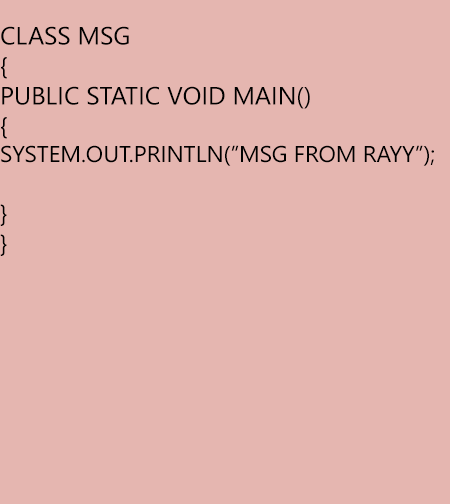
<style>
.page{position:relative;width:450px;height:504px;background:#e5b6b0}
.page>*{position:absolute;margin:0}
.t1{font:25px "NirmalaUI";color:#000000;text-transform:uppercase}
.t2{font:22.9px "NirmalaUI";color:#000000;text-transform:uppercase}
</style>
<div class="page">
<p class="t1" style="left:0px;top:26px;width:434px;height:230px">Class msg<br>{<br>public static void main()<br>{<br><span class="t2">System.out.println(”msg from rayy”);<br></span><br>}<br>}</p>
</div>
